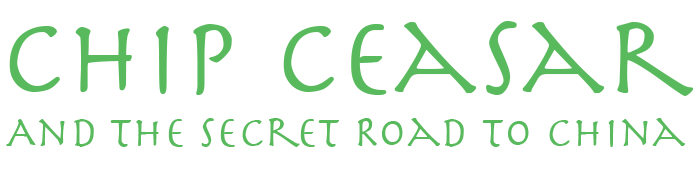
<style>
.page{position:relative;width:700px;height:170px;background:#ffffff}
.page>*{position:absolute;margin:0}
.t1{font:45.1px "Herculanum";color:#58ba5c}
.t2{font:112.8px "Herculanum";color:#58ba5c}
</style>
<div class="page">
<p class="t1" style="left:6px;top:21px;width:688px;height:126px;text-align:center"><span class="t2">Chip Ceasar<br></span>And The Secret Road to China</p>
</div>
